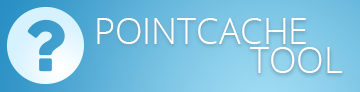
<style>
.page{position:relative;width:360px;height:92px}
.page>*{position:absolute;margin:0}
.t1{font:36px "OpenSans-Light";color:#ffffff;text-transform:uppercase}
</style>
<div class="page">
<p class="t1" style="left:97px;top:18px;width:209px;height:26px">PointCache</p>
<p class="t1" style="left:250px;top:47px;width:92px;height:26px">tool</p>
</div>
